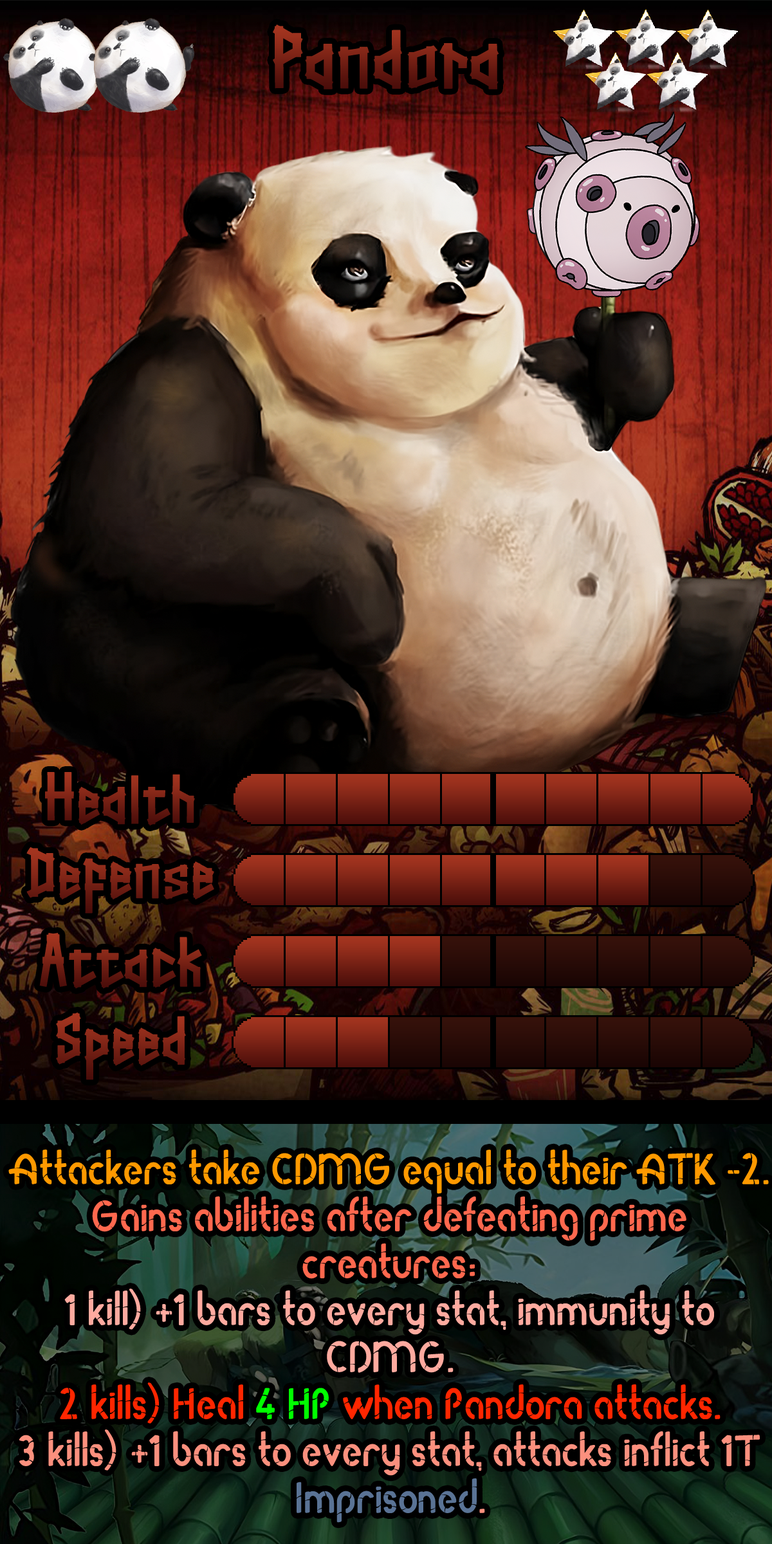
<style>
.page{position:relative;width:772px;height:1544px}
.page>*{position:absolute;margin:0}
.t1{font:156.4px "Straightwell"}
.t2{font:128.7px "Straightwell"}
.t3{font:128.7px "Straightwell";color:#7c2316}
.t4{font:74.6px/47px "RodaBamboo";color:#fc907e}
.t5{font:74.6px/47px "RodaBamboo";color:#ff9900}
.t6{font:74.6px/47px "RodaBamboo";color:#ff684e}
.t7{font:74.6px/47px "RodaBamboo";color:#ffaa9f}
.t8{font:74.6px/47px "RodaBamboo";color:#ff2600}
.t9{font:74.6px/47px "RodaBamboo";color:#00ff00}
.t10{font:74.6px/47px "RodaBamboo";color:#5a7395}
</style>
<div class="page">
<p class="t1" style="left:273px;top:24px;width:226px;height:65px">Pandora</p>
<p class="t2" style="left:45px;top:772px;width:150px;height:54px">Health</p>
<p class="t3" style="left:26px;top:847px;width:188px;height:67px">Defense</p>
<p class="t2" style="left:39px;top:933px;width:163px;height:56px">Attack</p>
<p class="t2" style="left:56px;top:1012px;width:130px;height:68px">Speed</p>
<p class="t4" style="left:8px;top:1149px;width:761px;height:374px;text-align:center"><span class="t5">Attackers take CDMG equal to their ATK -2.<br></span><span class="t6">Gains abilities after defeating prime creatures:<br></span><span class="t7">1 kill) +1 bars to every stat, immunity to CDMG.<br></span><span class="t8">2 kills) Heal </span><span class="t9">4 HP</span><span class="t8"> when Pandora attacks.<br></span>3 kills) +1 bars to every stat, attacks inflict 1T <span class="t10">Imprisoned</span>.</p>
</div>
